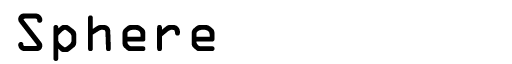
<style>
.page{position:relative;width:512px;height:64px;background:#ffffff}
.page>*{position:absolute;margin:0}
.t1{font:48px "OCRAStd";color:#000000}
</style>
<div class="page">
<p class="t1" style="left:18px;top:13px;width:197px;height:48px">Sphere</p>
</div>
